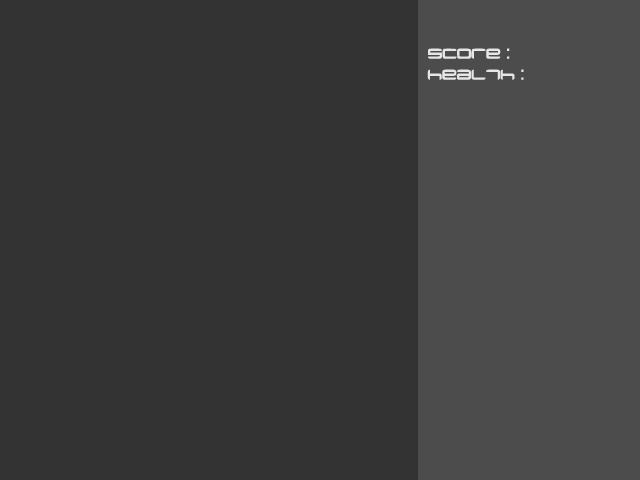
<style>
.page{position:relative;width:640px;height:480px;background:#333333}
.page>*{position:absolute;margin:0}
.t1{font:24px "Neutronium";color:#fdfcfc}
</style>
<div class="page">
<p class="t1" style="left:428px;top:48px;width:82px;height:11px;opacity:0.87">score :</p>
<p class="t1" style="left:427px;top:69px;width:97px;height:11px;opacity:0.87">health :</p>
</div>
